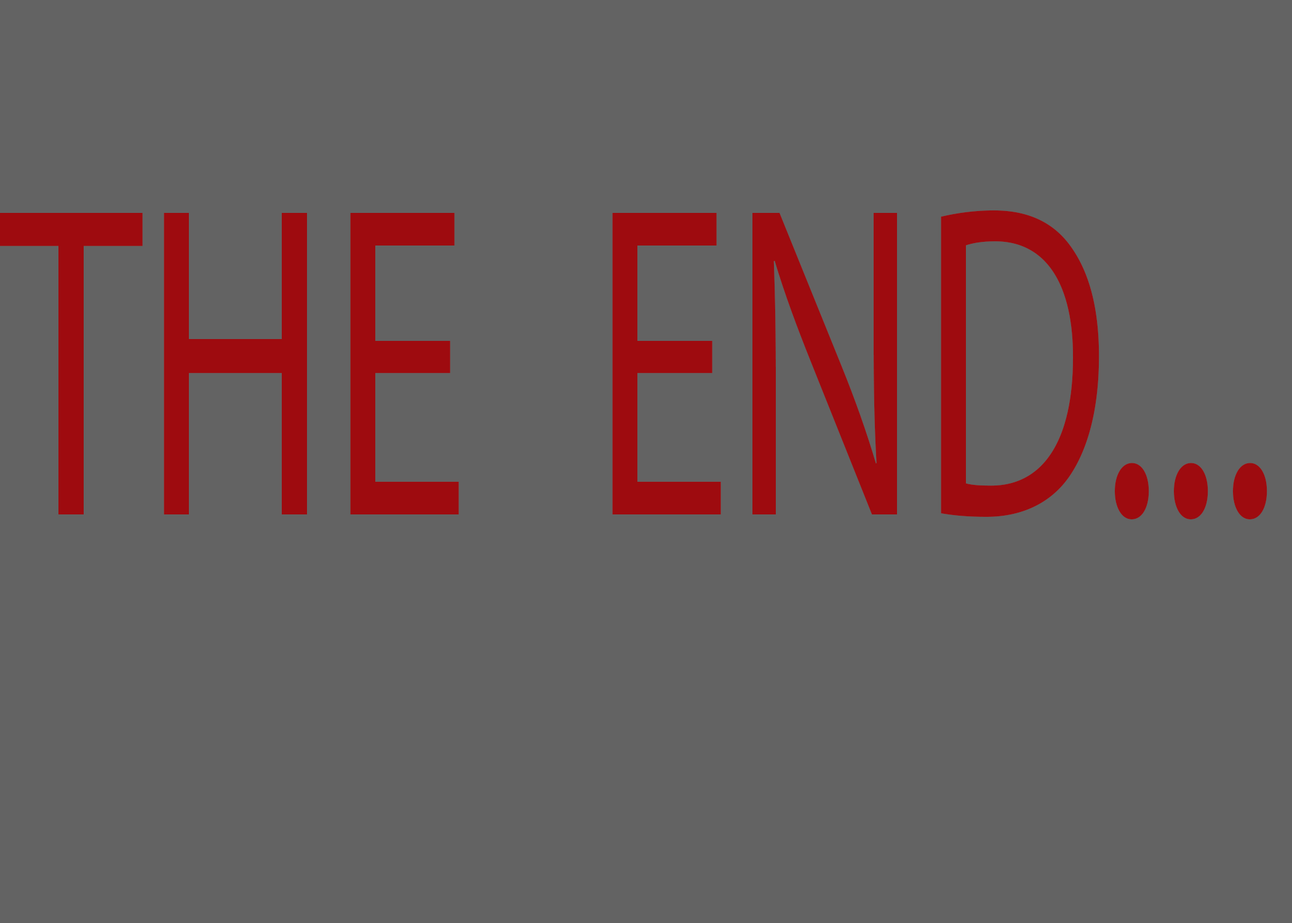
<style>
.page{position:relative;width:1292px;height:923px;background:#636363}
.page>*{position:absolute;margin:0}
.t1{font:107.3px "MyriadPro-Regular";color:#9e0b0f;scale:0.64 1}
</style>
<div class="page">
<p class="t1" style="left:0px;top:210px;width:1267px;height:309px">THE  END...</p>
</div>
